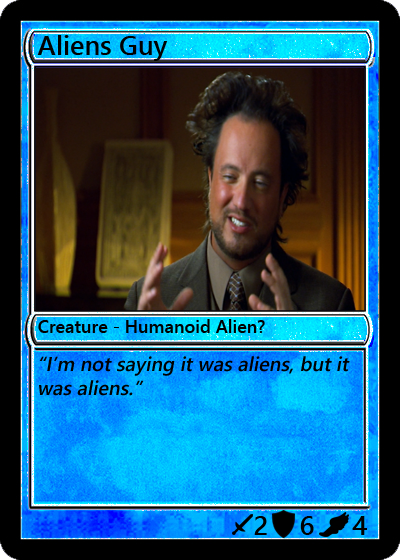
<style>
.page{position:relative;width:400px;height:560px}
.page>*{position:absolute;margin:0}
.t1{font:27px "YuGothicUI-Semibold";color:#000000}
.t2{font:18px "YuGothicUI-Semibold";color:#000000}
.t3{font:20px "YuGothicUI-Semibold";color:#000000;font-style:italic}
</style>
<div class="page">
<p class="t1" style="left:37px;top:35px;width:131px;height:26px">Aliens Guy</p>
<p class="t2" style="left:38px;top:319px;width:227px;height:14px">Creature - Humanoid Alien?</p>
<p class="t3" style="left:39px;top:356px;width:311px;height:40px">“I’m not saying it was aliens, but it was aliens.”</p>
<p class="t1" style="left:254px;top:516px;width:13px;height:19px">2</p>
<p class="t1" style="left:300px;top:516px;width:14px;height:19px">6</p>
<p class="t1" style="left:352px;top:516px;width:15px;height:19px">4</p>
</div>
